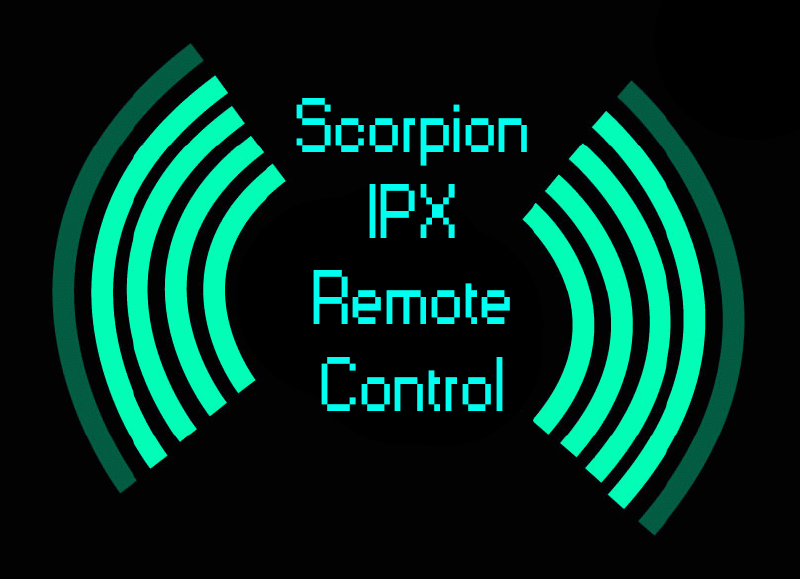
<style>
.page{position:relative;width:800px;height:579px;background:#020202}
.page>*{position:absolute;margin:0}
.t1{font:72px "Small Fonts";color:#00fff0}
</style>
<div class="page">
<p class="t1" style="left:296px;top:98px;width:231px;height:313px;text-align:center">Scorpion<br>IPX<br>Remote<br>Control</p>
</div>
